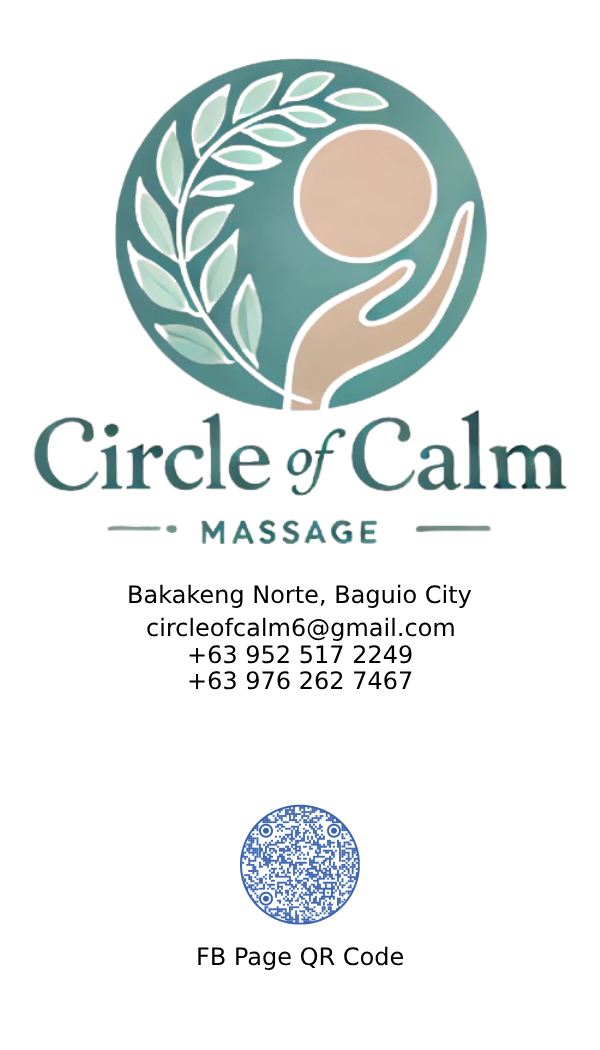
<style>
.page{position:relative;width:600px;height:1050px;background:#ffffff}
.page>*{position:absolute;margin:0}
.t1{font:24px "DejaVuSans";color:#000000}
</style>
<div class="page">
<p class="t1" style="left:129px;top:584px;width:343px;height:24px">Bakakeng Norte, Baguio City</p>
<p class="t1" style="left:147px;top:617px;width:307px;height:24px">circleofcalm6@gmail.com</p>
<p class="t1" style="left:189px;top:645px;width:223px;height:19px">+63 952 517 2249</p>
<p class="t1" style="left:189px;top:671px;width:223px;height:19px">+63 976 262 7467</p>
<p class="t1" style="left:198px;top:946px;width:205px;height:24px">FB Page QR Code</p>
</div>
